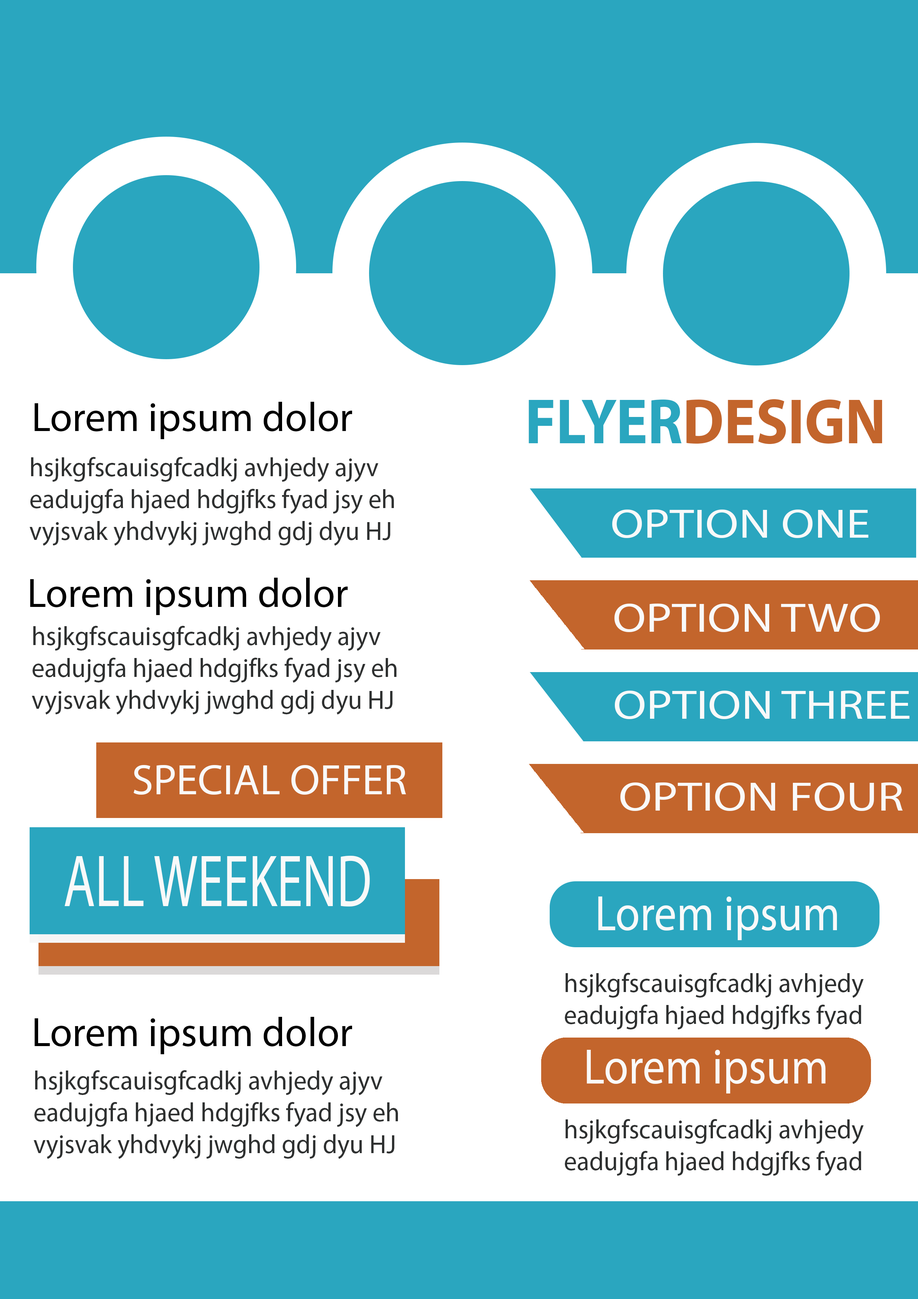
<style>
.page{position:relative;width:918px;height:1299px;background:#ffffff}
.page>*{position:absolute;margin:0}
.t1{font:41px "MyriadPro-Regular";color:#000000}
.t2{font:64.3px "MyriadPro-Bold";color:#c3652c;scale:0.92 1}
.t3{font:64.3px "MyriadPro-Bold";color:#2aa6bf;scale:0.92 1}
.t4{font:26.5px "MyriadPro-Regular";color:#2e3030}
.t5{font:41px "MyriadPro-Regular";color:#f9f9f9;scale:1.19 1}
.t6{font:50.2px "MyriadPro-Regular";color:#f9f9f9;scale:0.9 1}
</style>
<div class="page">
<p class="t1" style="left:34px;top:402px;width:318px;height:37px">Lorem ipsum dolor</p>
<p class="t2" style="left:529px;top:399px;width:353px;height:45px"><span class="t3">FLYER</span>DESIGN</p>
<p class="t4" style="left:30px;top:457px;width:364px;height:89px">hsjkgfscauisgfcadkj avhjedy ajyv <br>eadujgfa hjaed hdgjfks fyad jsy eh<br>vyjsvak yhdvykj jwghd gdj dyu HJ</p>
<p class="t1" style="left:30px;top:578px;width:318px;height:37px">Lorem ipsum dolor</p>
<p class="t5" style="left:615px;top:603px;width:265px;height:29px">OPTION TWO</p>
<p class="t4" style="left:32px;top:626px;width:365px;height:89px">hsjkgfscauisgfcadkj avhjedy ajyv <br>eadujgfa hjaed hdgjfks fyad jsy eh<br>vyjsvak yhdvykj jwghd gdj dyu HJ</p>
<p class="t5" style="left:615px;top:690px;width:295px;height:29px">OPTION THREE</p>
<p class="t5" style="left:620px;top:782px;width:283px;height:29px">OPTION FOUR</p>
<p class="t6" style="left:598px;top:896px;width:239px;height:44px">Lorem ipsum</p>
<p class="t4" style="left:565px;top:973px;width:299px;height:57px">hsjkgfscauisgfcadkj avhjedy  <br>eadujgfa hjaed hdgjfks fyad</p>
<p class="t1" style="left:34px;top:1017px;width:318px;height:37px">Lorem ipsum dolor</p>
<p class="t6" style="left:587px;top:1050px;width:239px;height:43px">Lorem ipsum</p>
<p class="t4" style="left:34px;top:1070px;width:364px;height:89px">hsjkgfscauisgfcadkj avhjedy ajyv <br>eadujgfa hjaed hdgjfks fyad jsy eh<br>vyjsvak yhdvykj jwghd gdj dyu HJ</p>
<p class="t4" style="left:565px;top:1119px;width:299px;height:57px">hsjkgfscauisgfcadkj avhjedy  <br>eadujgfa hjaed hdgjfks fyad</p>
</div>
